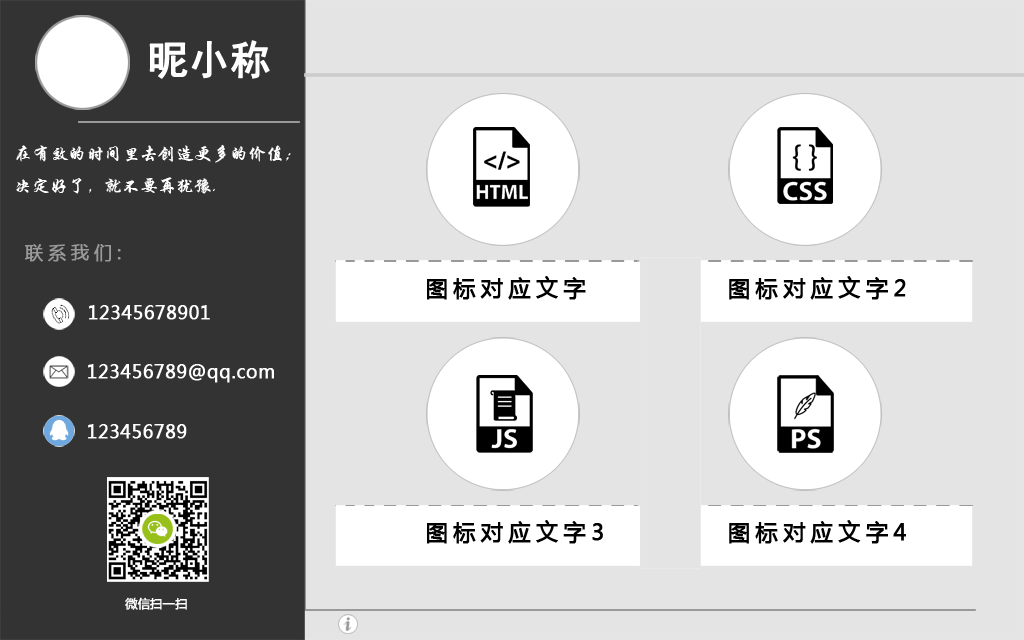
<style>
.page{position:relative;width:1024px;height:640px;background:#e5e4e4}
.page>*{position:absolute;margin:0}
.t1{font:40px "SimHei";color:#ffffff;font-weight:bold}
.t2{font:18px "STXingkai";color:#ffffff}
.t3{font:18.3px "MicrosoftYaHei";letter-spacing:0.23em;color:#999999;font-weight:bold}
.t4{font:21.9px "MicrosoftYaHei";letter-spacing:0.23em;color:#000000;font-weight:bold}
.t5{font:18.3px "MicrosoftYaHei";color:#ffffff;font-weight:bold}
.t6{font:12.2px "MicrosoftYaHei";color:#ffffff;font-weight:bold}
</style>
<div class="page">
<p class="t1" style="left:149px;top:40px;width:121px;height:39px">昵小称</p>
<p class="t2" style="left:16px;top:144px;width:275px;height:50px">在有效的时间里去创造更多的价值；<br>决定好了，就不要再犹豫.</p>
<p class="t3" style="left:25px;top:244px;width:96px;height:18px">联系我们:</p>
<p class="t4" style="left:427px;top:276px;width:159px;height:24px">图标对应文字</p>
<p class="t4" style="left:729px;top:276px;width:177px;height:24px">图标对应文字2</p>
<p class="t5" style="left:89px;top:305px;width:121px;height:15px">12345678901</p>
<p class="t5" style="left:88px;top:364px;width:186px;height:19px">123456789@qq.com</p>
<p class="t5" style="left:88px;top:424px;width:99px;height:15px">123456789</p>
<p class="t4" style="left:427px;top:520px;width:176px;height:24px">图标对应文字3</p>
<p class="t4" style="left:729px;top:520px;width:177px;height:24px">图标对应文字4</p>
<p class="t6" style="left:125px;top:597px;width:62px;height:13px">微信扫一扫</p>
</div>
